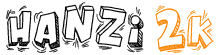
<style>
.page{position:relative;width:220px;height:55px;background:#ffffff}
.page>*{position:absolute;margin:0}
.t1{font:26.2px/38px "GoodMorning";letter-spacing:0.01em;color:#000000}
.t2{font:26.2px/38px "GoodMorning";letter-spacing:0.01em;color:#f88502}
</style>
<div class="page">
<p class="t1" style="left:6px;top:2px;width:208px;height:51px;text-align:center">HANZI <span class="t2">2K</span></p>
</div>
